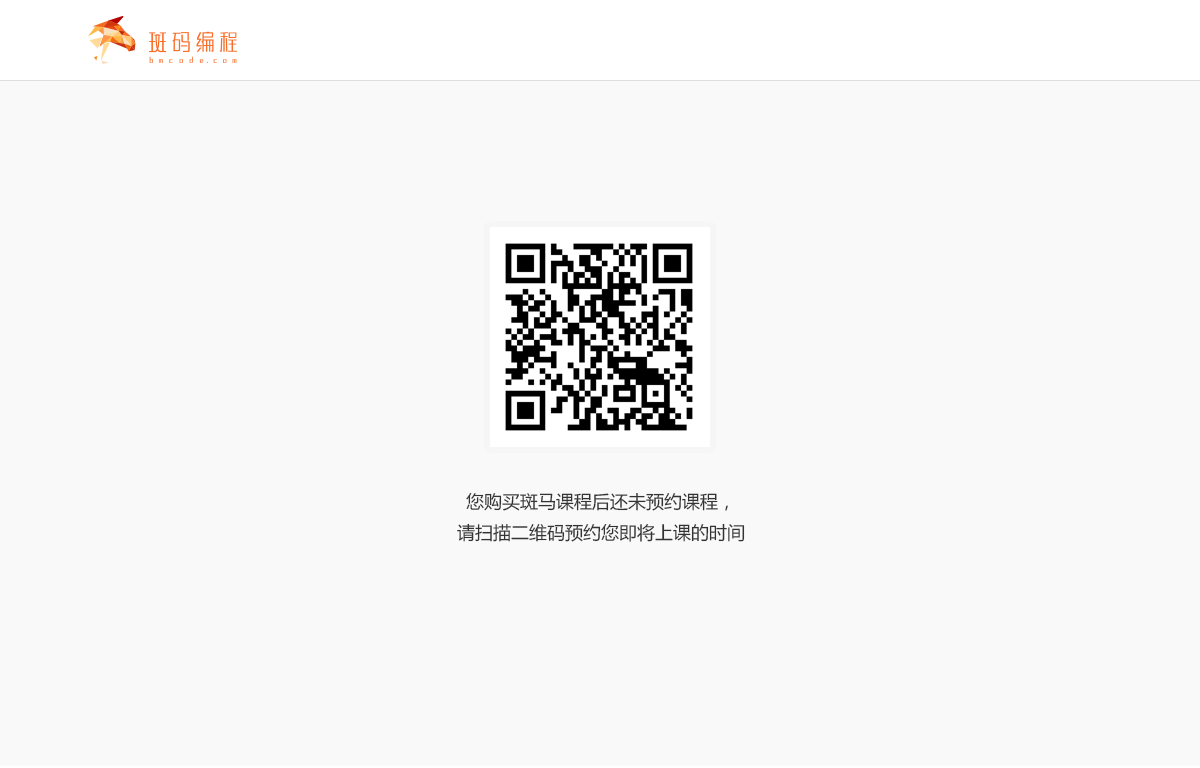
<style>
.page{position:relative;width:1200px;height:768px;background:#f9f9f9}
.page>*{position:absolute;margin:0}
.t1{font:18px/30px "MicrosoftYaHei";color:#333333}
</style>
<div class="page">
<p class="t1" style="left:457px;top:493px;width:288px;height:49px;text-align:center">您购买斑马课程后还未预约课程，<br>请扫描二维码预约您即将上课的时间</p>
</div>
